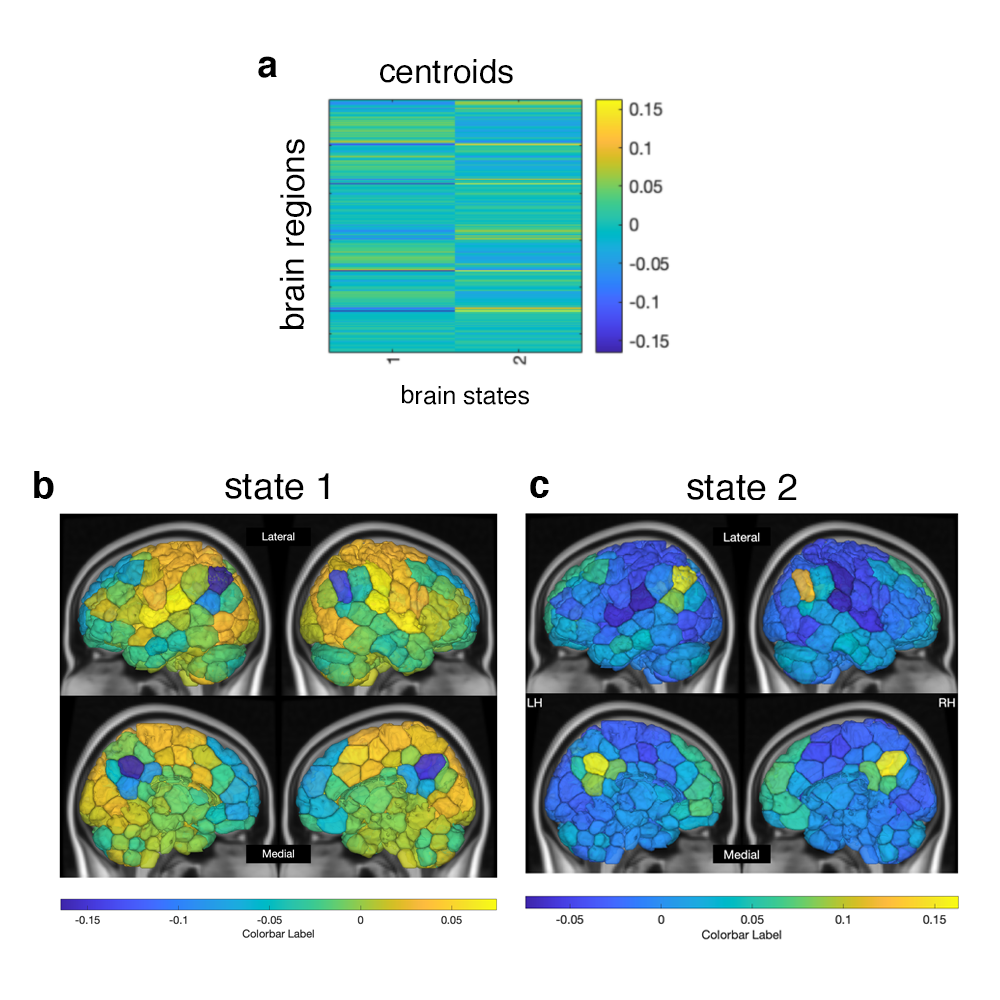
<style>
.page{position:relative;width:1000px;height:1000px;background:#ffffff}
.page>*{position:absolute;margin:0}
.t1{font:37.5px "Helvetica-Bold";color:#000000}
.t2{font:33.3px "Helvetica";color:#000000}
.t3{font:25px "Helvetica";color:#000000}
.t4{font:37.5px "Helvetica";color:#000000}
</style>
<div class="page">
<p class="t1" style="left:258px;top:56px;width:19px;height:22px">a</p>
<p class="t2" style="left:380px;top:59px;width:133px;height:25px">centroids</p>
<p class="t2" style="left:279px;top:139px;width:33px;height:190px;rotate:-90deg">brain regions</p>
<p class="t3" style="left:402px;top:385px;width:127px;height:20px">brain states</p>
<p class="t1" style="left:34px;top:471px;width:20px;height:28px">b</p>
<p class="t4" style="left:225px;top:473px;width:104px;height:27px">state 1</p>
<p class="t4" style="left:687px;top:473px;width:110px;height:28px">state 2</p>
<p class="t1" style="left:530px;top:476px;width:19px;height:22px">c</p>
</div>
